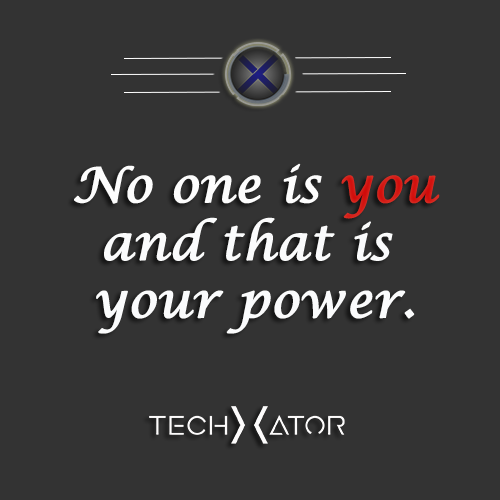
<style>
.page{position:relative;width:500px;height:500px;background:#333333}
.page>*{position:absolute;margin:0}
.t1{font:48px "LucidaCalligraphy-Italic";color:#fafbfc;font-weight:bold}
.t2{font:48px "LucidaCalligraphy-Italic";color:#fdfdfd;font-weight:bold}
.t3{font:48px "LucidaCalligraphy-Italic";color:#d00707;font-weight:bold}
</style>
<div class="page">
<p class="t1" style="left:74px;top:163px;width:366px;height:171px;text-align:center"><span class="t2">No one is </span><span class="t3">you<br></span>and that is <br>your power.</p>
</div>
